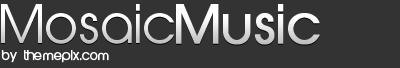
<style>
.page{position:relative;width:400px;height:68px;background:#333333}
.page>*{position:absolute;margin:0}
.t1{font:51px "AbeatbyKai"}
.t2{font:51px "AbeatbyKai";font-weight:bold}
.t3{font:12px "AbeatbyKai";color:#ffffff;font-weight:bold}
</style>
<div class="page">
<p class="t1" style="left:1px;top:4px;width:319px;height:41px">Mosaic<span class="t2">Music</span></p>
<p class="t3" style="left:1px;top:50px;width:108px;height:13px">by themepix.com</p>
</div>
